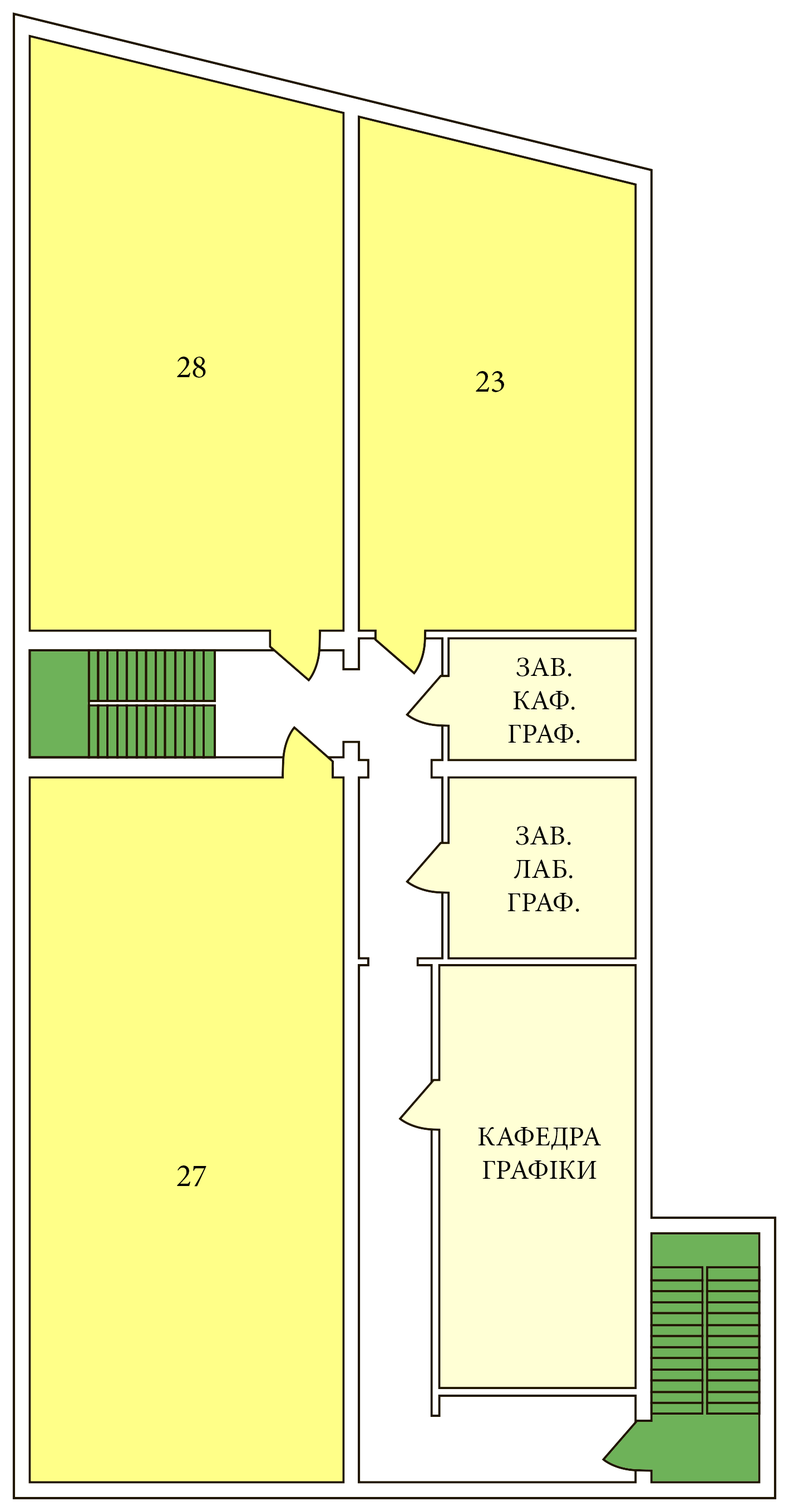
<style>
.page{position:relative;width:789px;height:1512px;background:#ffff88}
.page>*{position:absolute;margin:0}
.t1{font:32.4px "MinionPro-Regular";color:#000000}
.t2{font:27.8px "MinionPro-Regular";color:#000000}
.t3{font:27.7px "MinionPro-Regular";color:#000000}
</style>
<div class="page">
<p class="t1" style="left:177px;top:357px;width:29px;height:21px">28</p>
<p class="t1" style="left:476px;top:371px;width:28px;height:21px">23</p>
<p class="t2" style="left:508px;top:657px;width:72px;height:86px;text-align:center">ЗАВ.<br>КАФ.<br>ГРАФ.</p>
<p class="t2" style="left:507px;top:826px;width:72px;height:86px;text-align:center">ЗАВ.<br>ЛАБ.<br>ГРАФ.</p>
<p class="t3" style="left:478px;top:1127px;width:123px;height:52px;text-align:center">КАФЕДРА<br>ГРАФІКИ</p>
<p class="t1" style="left:177px;top:1165px;width:29px;height:21px">27</p>
</div>
